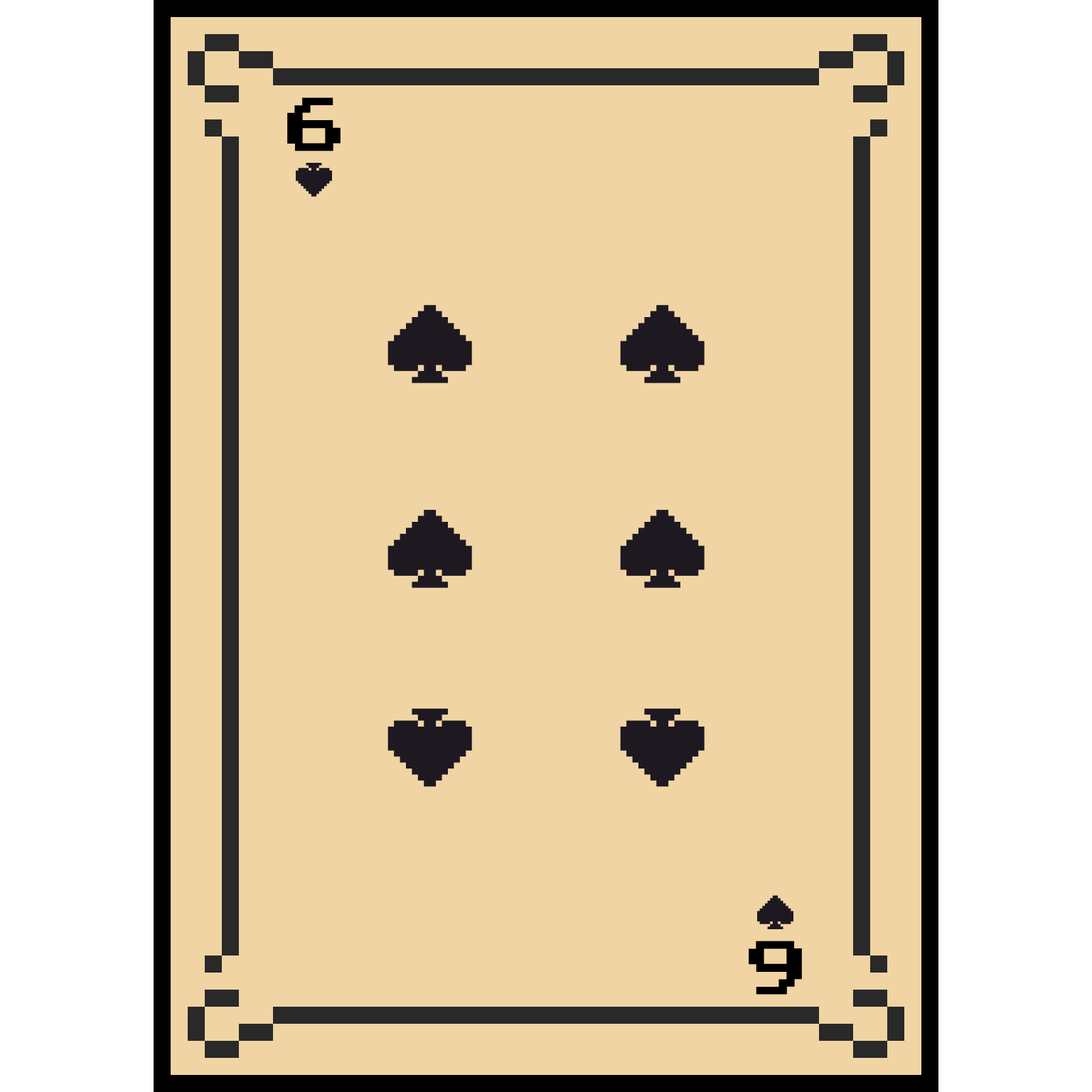
<style>
.page{position:relative;width:1092px;height:1092px;background:#f0d4a3}
.page>*{position:absolute;margin:0}
.t1{font:106.6px "ArcadeClassic";color:#000000}
</style>
<div class="page">
<p class="t1" style="left:287px;top:97px;width:54px;height:54px">6</p>
<p class="t1" style="left:749px;top:941px;width:53px;height:54px;rotate:180deg">6</p>
</div>
